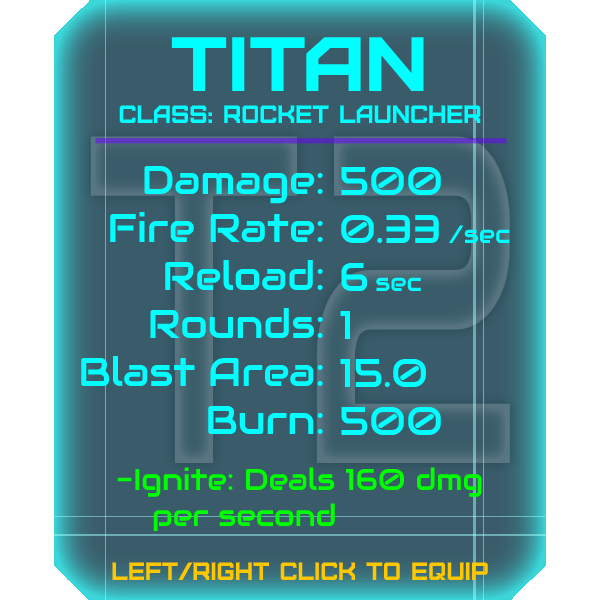
<style>
.page{position:relative;width:600px;height:600px;background:#3a5c6a}
.page>*{position:absolute;margin:0}
.t1{font:76.8px "Furore";color:#00ffff;scale:1.13 1}
.t2{font:25px "Furore";color:#00ffff}
.t3{font:40px "Audiowide-Regular";color:#00ffff}
.t4{font:25px "Audiowide-Regular";color:#00ffff}
.t5{font:30px "Audiowide-Regular";color:#00ff00}
.t6{font:40px "Audiowide-Regular";color:#00ff00}
.t7{font:25px "Furore";color:#ffc700}
</style>
<div class="page">
<p class="t1" style="left:171px;top:37px;width:253px;height:54px">Titan</p>
<p class="t2" style="left:119px;top:105px;width:362px;height:18px">Class: rocket launcher</p>
<p class="t3" style="left:81px;top:165px;width:242px;height:269px;text-align:right">Damage:<br>Fire Rate:<br>Reload:<br>Rounds:<br>Blast Area:<br>Burn:</p>
<p class="t3" style="left:340px;top:166px;width:170px;height:269px">500<br>0.33 <span class="t4">/sec<br></span>6 <span class="t4">sec<br></span>1<br>15.0<br>500</p>
<p class="t5" style="left:117px;top:467px;width:365px;height:64px"><span class="t6"><br><br><br><br><br><br></span>-Ignite: Deals 160 dmg<br> per second</p>
<p class="t7" style="left:112px;top:562px;width:376px;height:18px">left/right click to equip</p>
</div>
